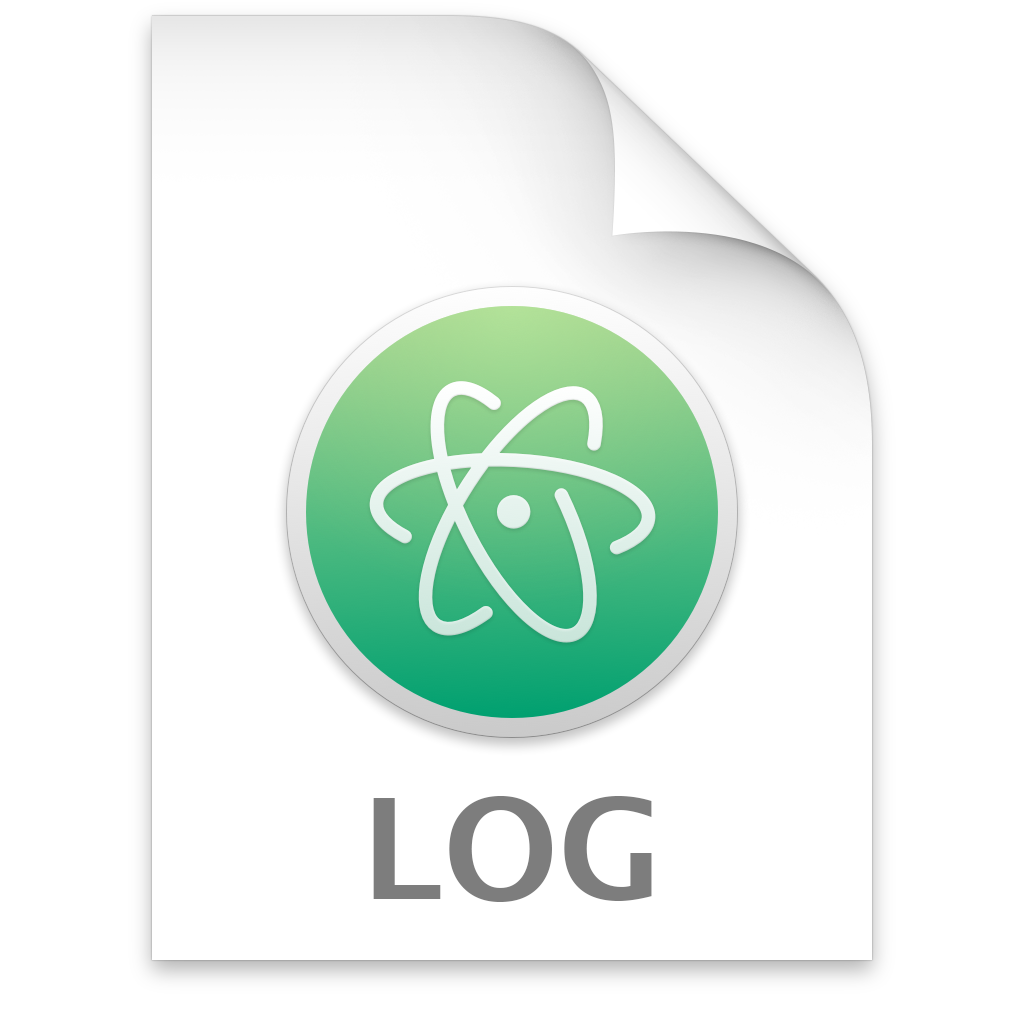
<style>
.page{position:relative;width:1024px;height:1024px;background:#ffffff}
.page>*{position:absolute;margin:0}
.t1{font:140px "LucidaGrande-Bold";color:#7d7d7d}
</style>
<div class="page">
<p class="t1" style="left:373px;top:796px;width:279px;height:106px">LOG</p>
</div>
